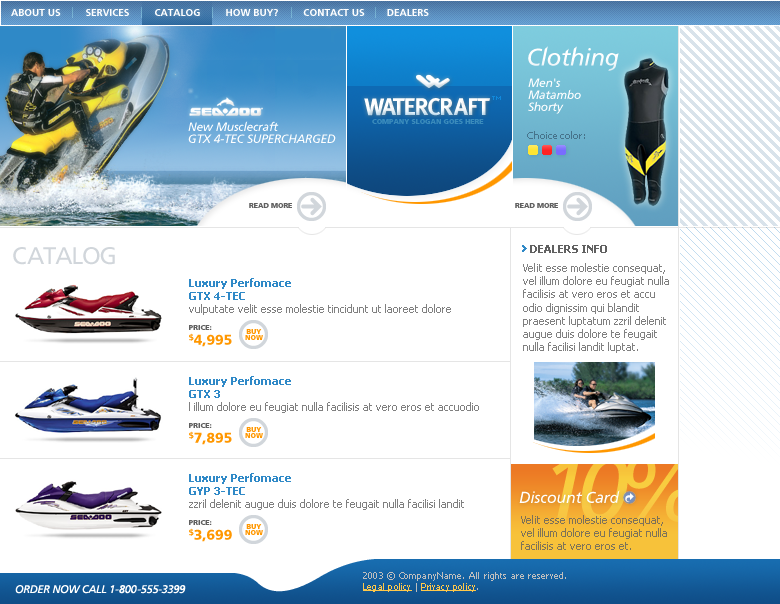
<style>
.page{position:relative;width:780px;height:604px;background:#ffffff}
.page>*{position:absolute;margin:0}
.t1{font:10px "FreewayDemi";color:#ffffff;text-transform:uppercase}
.t2{font:24px "FreewayRomanItalic";letter-spacing:-0.02em;color:#ffffff}
.t3{font:12px/12px "FreewayRomanItalic";letter-spacing:-0.02em;color:#ffffff}
.t4{font:24px "MetaC-Bold";letter-spacing:-0.04em;color:#ffffff;text-transform:uppercase}
.t5{font:7px "FreewayBlack";color:#3a8bbb;text-transform:uppercase}
.t6{font:10px "Tahoma";letter-spacing:-0.02em;color:#46738b}
.t7{font:7px "FreewayBlack";color:#606060;text-transform:uppercase}
.t8{font:11px "Tahoma-Bold";color:#606060;text-transform:uppercase}
.t9{font:24px "FreewayRoman1";letter-spacing:-0.05em;color:#d1d6db;text-transform:uppercase}
.t10{font:11px "Tahoma";color:#808080}
.t11{font:11px "Tahoma-Bold";color:#2f89c7}
.t12{font:7px/6px "FreewayBlack";color:#ff9700;text-transform:uppercase}
.t13{font:14px "FreewayBlack";color:#ff9700;text-transform:uppercase}
.t14{font:16px "FreewayRomanItalic";letter-spacing:-0.02em;color:#ffffff}
.t15{font:11px "Tahoma";color:#7e7358}
.t16{font:9px "Tahoma";letter-spacing:0.025em;color:#bebebe}
.t17{font:9px "Tahoma";letter-spacing:0.025em;color:#ffc84a;text-decoration:underline}
.t18{font:11px "FreewayRomanItalic";letter-spacing:-0.025em;color:#ffffff}
</style>
<div class="page">
<p class="t1" style="left:11px;top:9px;width:418px;height:7px">About Us         Services         catalog         how buy?         Contact Us        DEALERS</p>
<p class="t2" style="left:528px;top:46px;width:91px;height:25px">Clothing</p>
<p class="t3" style="left:528px;top:78px;width:53px;height:36px">Men's <br>Matambo <br>Shorty</p>
<p class="t4" style="left:364px;top:98px;width:126px;height:18px">Watercraft</p>
<p class="t3" style="left:188px;top:121px;width:148px;height:22px">New Musclecraft<br>GTX 4-TEC SUPERCHARGED</p>
<p class="t5" style="left:372px;top:119px;width:112px;height:5px">company slogan goes here</p>
<p class="t6" style="left:527px;top:131px;width:58px;height:8px">Choice color:</p>
<p class="t7" style="left:249px;top:203px;width:43px;height:5px">read more</p>
<p class="t7" style="left:515px;top:203px;width:43px;height:5px">read more</p>
<p class="t8" style="left:530px;top:245px;width:77px;height:8px">DEALERS INFO</p>
<p class="t9" style="left:13px;top:247px;width:102px;height:18px">CATALOG</p>
<p class="t10" style="left:523px;top:263px;width:146px;height:90px">Velit esse molestie consequat,<br>vel illum dolore eu feugiat nulla<br>facilisis at vero eros et accu<br>odio dignissim qui blandit<br>praesent luptatum zzril delenit<br>augue duis dolore te feugait<br>nulla facilisi landit luptat.</p>
<p class="t10" style="left:189px;top:278px;width:262px;height:37px"><span class="t11">Luxury Perfomace<br>GTX 4-TEC<br></span>vulputate velit esse molestie tincidunt ut laoreet dolore</p>
<p class="t7" style="left:189px;top:325px;width:23px;height:5px">price:</p>
<p class="t12" style="left:245px;top:329px;width:18px;height:11px;text-align:center">BUY<br>NOW</p>
<p class="t13" style="left:189px;top:333px;width:43px;height:14px">$4,995</p>
<p class="t10" style="left:189px;top:376px;width:290px;height:37px"><span class="t11">Luxury Perfomace<br>GTX 3<br></span>l illum dolore eu feugiat nulla facilisis at vero eros et accuodio</p>
<p class="t7" style="left:189px;top:423px;width:23px;height:5px">price:</p>
<p class="t13" style="left:189px;top:431px;width:43px;height:14px">$7,895</p>
<p class="t12" style="left:245px;top:427px;width:18px;height:11px;text-align:center">BUY<br>NOW</p>
<p class="t10" style="left:189px;top:473px;width:275px;height:37px"><span class="t11">Luxury Perfomace<br>GYP 3-TEC<br></span>zzril delenit augue duis dolore te feugait nulla facilisi landit</p>
<p class="t14" style="left:519px;top:490px;width:101px;height:13px">Discount Card</p>
<p class="t7" style="left:189px;top:520px;width:23px;height:5px">price:</p>
<p class="t15" style="left:521px;top:515px;width:146px;height:35px">Velit esse molestie consequat,<br>vel illum dolore eu feugiat nulla<br>facilisis at vero eros et.</p>
<p class="t13" style="left:189px;top:528px;width:43px;height:14px">$3,699</p>
<p class="t12" style="left:245px;top:524px;width:18px;height:11px;text-align:center">BUY<br>NOW</p>
<p class="t16" style="left:363px;top:572px;width:203px;height:20px">2003 © CompanyName. All rights are reserved. <br><span class="t17">Legal policy </span>| <span class="t17">Privacy policy</span>.</p>
<p class="t18" style="left:15px;top:585px;width:171px;height:9px">ORDER NOW CALL 1-800-555-3399</p>
</div>
